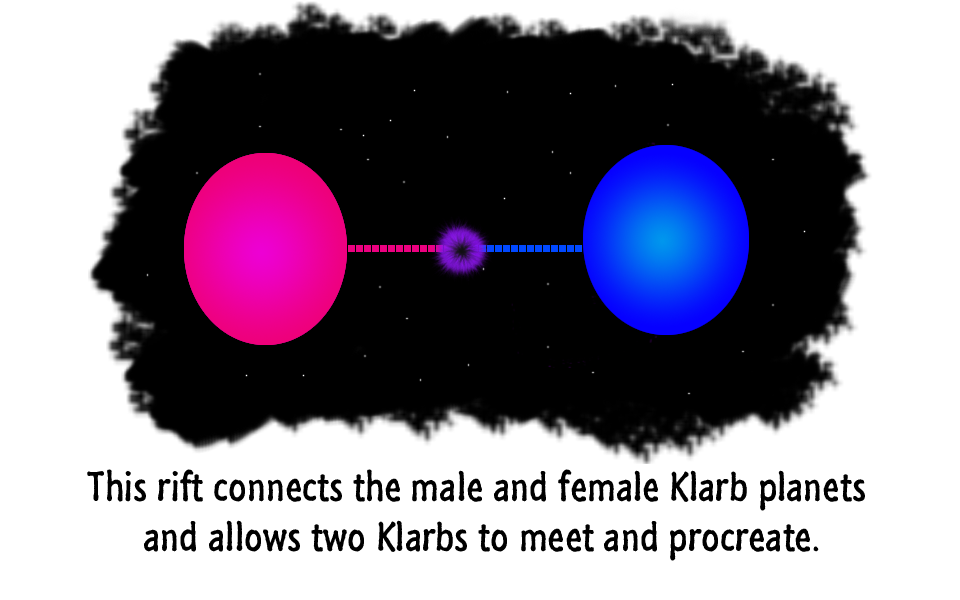
<style>
.page{position:relative;width:960px;height:600px;background:#ffffff}
.page>*{position:absolute;margin:0}
.t1{font:42px "SegoeMarker";color:#000000}
</style>
<div class="page">
<p class="t1" style="left:87px;top:469px;width:778px;height:92px;text-align:center">This rift connects the male and female Klarb planets <br>and allows two Klarbs to meet and procreate.</p>
</div>
